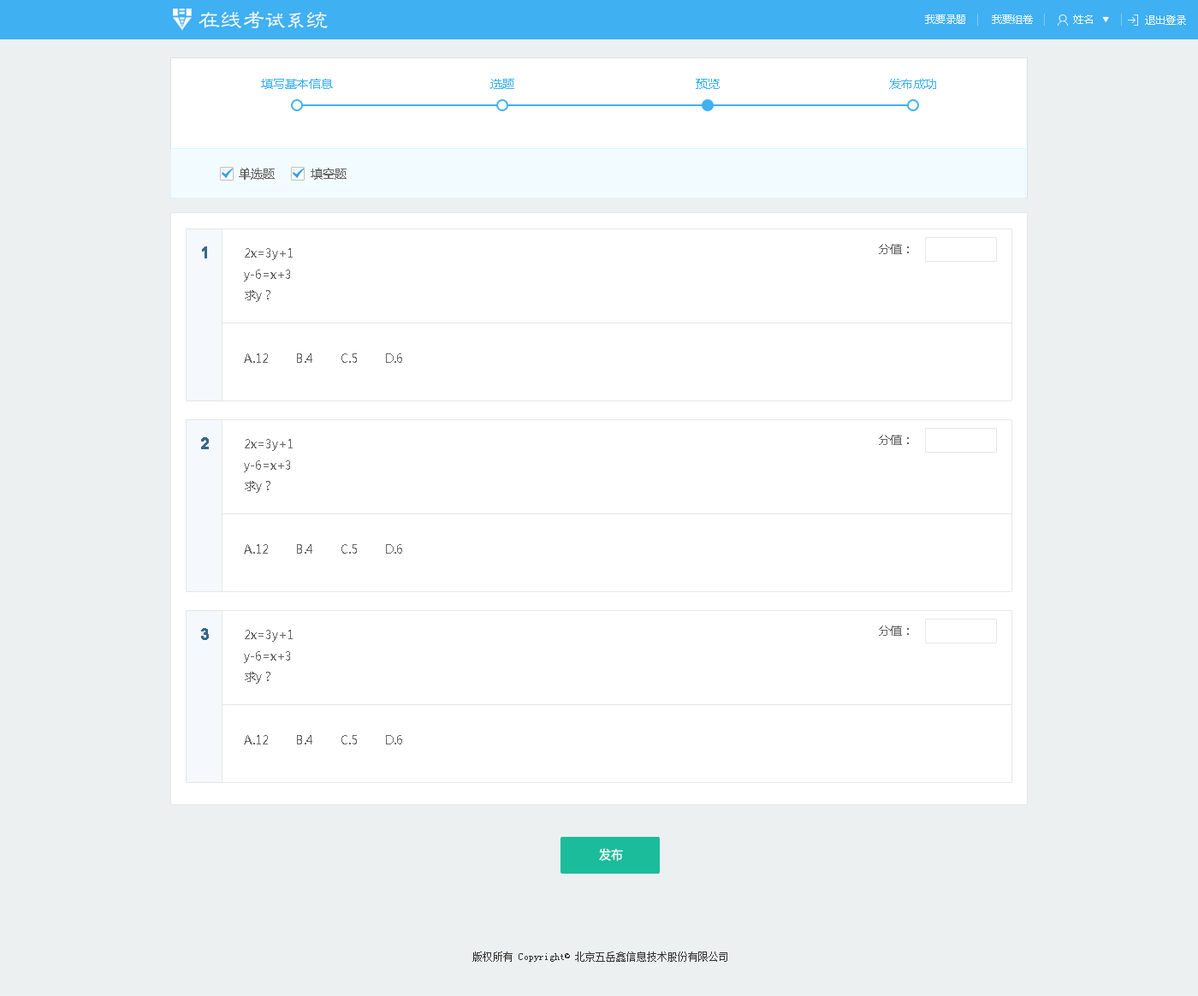
<style>
.page{position:relative;width:1198px;height:996px;background:#ffffff}
.page>*{position:absolute;margin:0}
.t1{font:22.2px "GBJenLei-Medium";color:#ffffff}
.t2{font:20.5px "GBJenLei-Medium";color:#ffffff}
.t3{font:10.3px "MicrosoftYaHei";color:#ffffff}
.t4{font:12px "MicrosoftYaHei";color:#3fb0f2}
.t5{font:12px "MicrosoftYaHei";color:#666666}
.t6{font:15.4px "ArialMT";color:#376987;font-weight:bold}
.t7{font:12.3px "MicrosoftYaHei";color:#ffffff}
.t8{font:10.3px "NSimSun";color:#333333}
</style>
<div class="page">
<p class="t1" style="left:198px;top:11px;width:130px;height:18px">在线考<span class="t2">试系</span>统</p>
<p class="t3" style="left:925px;top:15px;width:40px;height:9px;opacity:0.9">我要录题</p>
<p class="t3" style="left:991px;top:15px;width:41px;height:9px;opacity:0.9">我要组卷</p>
<p class="t3" style="left:1073px;top:15px;width:19px;height:9px;opacity:0.9">姓名</p>
<p class="t3" style="left:1145px;top:15px;width:41px;height:10px;opacity:0.9">退出登录</p>
<p class="t4" style="left:261px;top:79px;width:72px;height:10px">填写基本信息</p>
<p class="t4" style="left:490px;top:79px;width:24px;height:10px">选题</p>
<p class="t4" style="left:695px;top:79px;width:24px;height:10px">预览</p>
<p class="t4" style="left:889px;top:79px;width:47px;height:10px">发布成功</p>
<p class="t5" style="left:239px;top:168px;width:36px;height:12px">单选题</p>
<p class="t5" style="left:311px;top:168px;width:35px;height:12px">填空题</p>
<p class="t5" style="left:879px;top:244px;width:29px;height:10px">分值：</p>
<p class="t6" style="left:202px;top:246px;width:5px;height:12px">1</p>
<p class="t5" style="left:244px;top:248px;width:158px;height:115px">2x=3y+1<br>y-6=x+3<br>求y？<br><br><br>A.12        B.4        C.5        D.6</p>
<p class="t6" style="left:201px;top:437px;width:8px;height:12px">2</p>
<p class="t5" style="left:879px;top:435px;width:29px;height:10px">分值：</p>
<p class="t5" style="left:244px;top:439px;width:158px;height:114px">2x=3y+1<br>y-6=x+3<br>求y？<br><br><br>A.12        B.4        C.5        D.6</p>
<p class="t6" style="left:201px;top:628px;width:8px;height:12px">3</p>
<p class="t5" style="left:244px;top:630px;width:158px;height:114px">2x=3y+1<br>y-6=x+3<br>求y？<br><br><br>A.12        B.4        C.5        D.6</p>
<p class="t5" style="left:879px;top:625px;width:29px;height:11px">分值：</p>
<p class="t7" style="left:599px;top:848px;width:24px;height:13px">发布</p>
<p class="t8" style="left:472px;top:951px;width:255px;height:10px">版权所有 Copyright© 北京五岳鑫信息技术股份有限公司</p>
</div>
